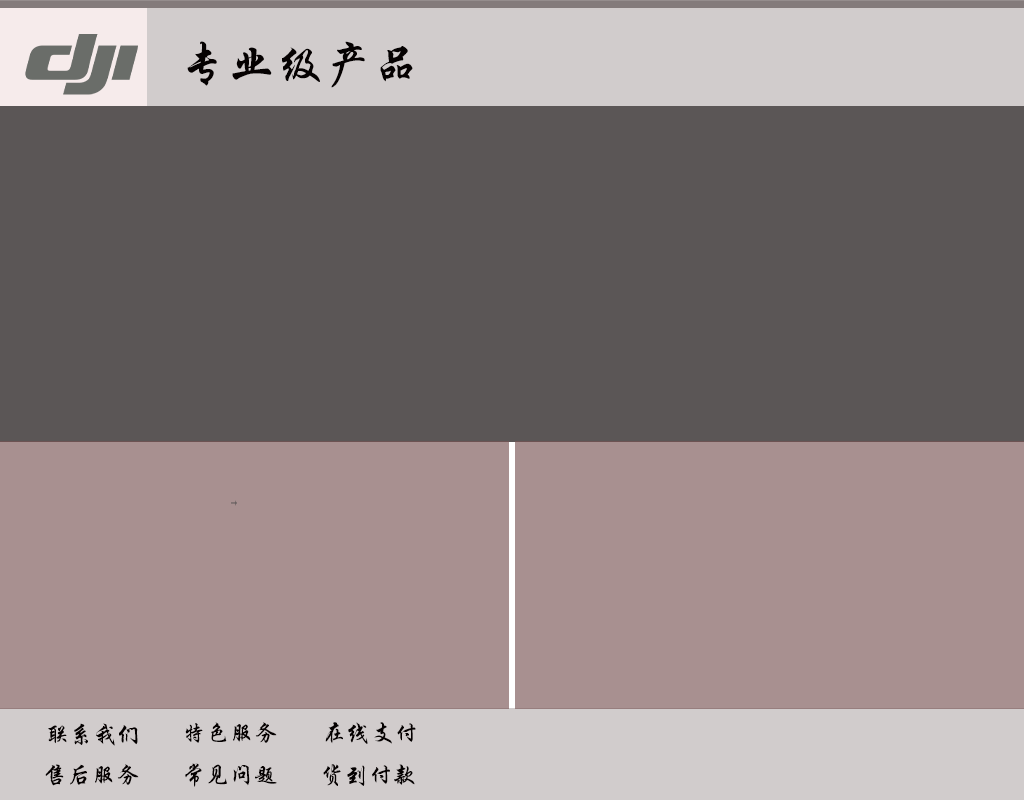
<style>
.page{position:relative;width:1024px;height:800px;background:#5b5656}
.page>*{position:absolute;margin:0}
.t1{font:48px "STXingkai";color:#050101}
.t2{font:24px "STXingkai";color:#050101}
</style>
<div class="page">
<p class="t1" style="left:187px;top:41px;width:226px;height:47px">专业级产品</p>
<p class="t2" style="left:48px;top:723px;width:90px;height:23px">联系我们</p>
<p class="t2" style="left:185px;top:722px;width:92px;height:21px">特色服务</p>
<p class="t2" style="left:325px;top:722px;width:91px;height:22px">在线支付</p>
<p class="t2" style="left:45px;top:764px;width:94px;height:22px">售后服务</p>
<p class="t2" style="left:185px;top:763px;width:92px;height:24px">常见问题</p>
<p class="t2" style="left:323px;top:764px;width:92px;height:22px">货到付款</p>
</div>
